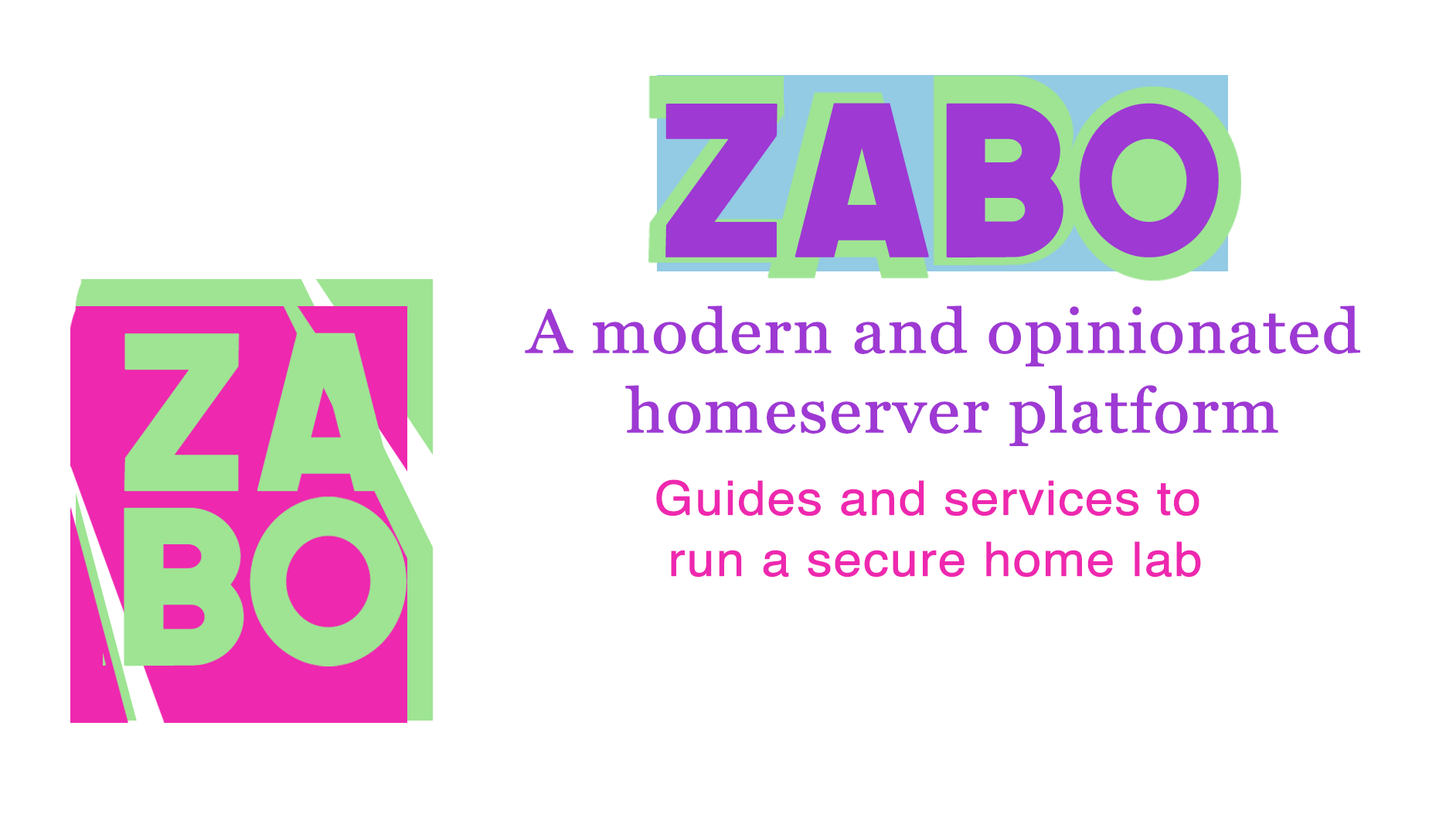
<style>
.page{position:relative;width:1429px;height:835px;background:#ffffff}
.page>*{position:absolute;margin:0}
.t1{font:61.8px/79.6px "Georgia";color:#9e39d3;font-weight:bold;scale:1.08 1}
.t2{font:47.1px/61px "Helvetica";color:#ee28af;font-weight:bold;scale:1.08 1}
</style>
<div class="page">
<p class="t1" style="left:525px;top:305px;width:835px;height:141px;text-align:center">A modern and opinionated <br>homeserver platform</p>
<p class="t2" style="left:656px;top:479px;width:545px;height:98px;text-align:center">Guides and services to <br>run a secure home lab</p>
</div>
